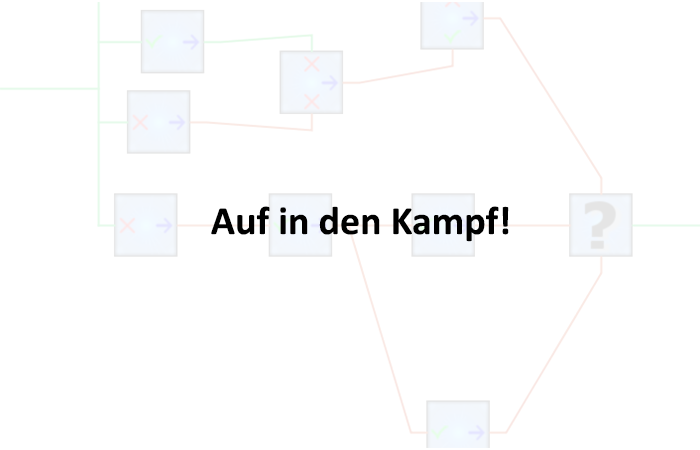
<style>
.page{position:relative;width:700px;height:450px;background:#ffffff}
.page>*{position:absolute;margin:0}
.t1{font:40px "Calibri-Bold";color:#000000}
</style>
<div class="page">
<p class="t1" style="left:211px;top:206px;width:298px;height:36px">Auf in den Kampf!</p>
</div>
